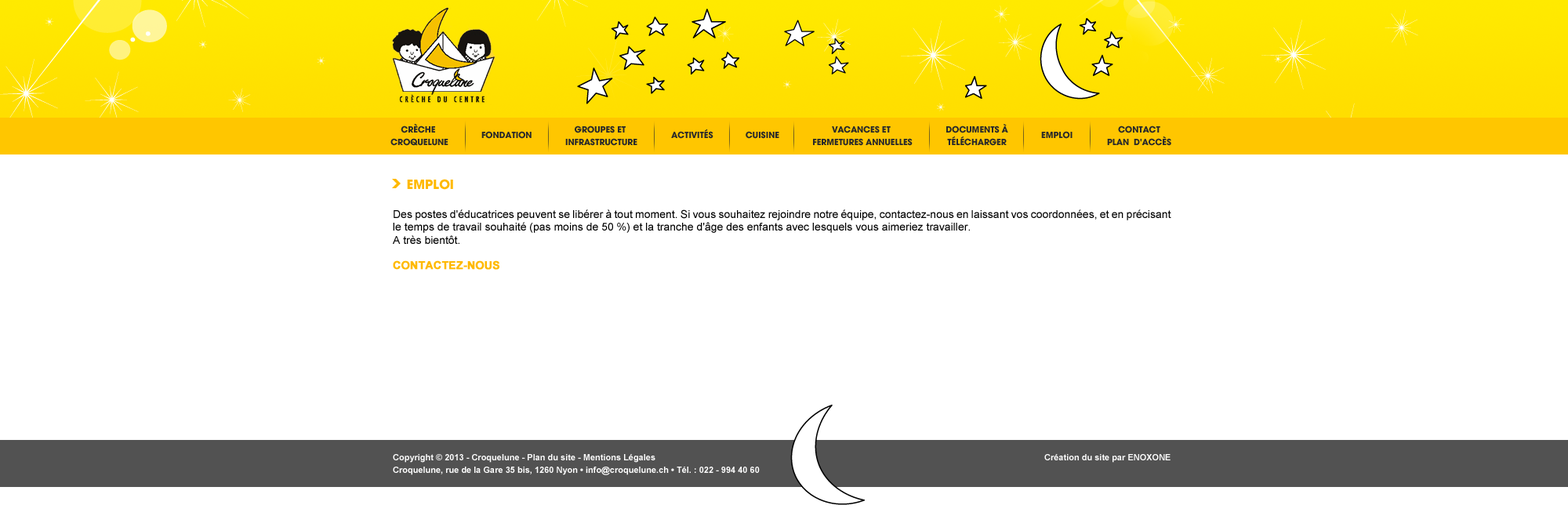
<style>
.page{position:relative;width:1568px;height:527px;background:#ffffff}
.page>*{position:absolute;margin:0}
.t1{font:9.4px/12.7px "AvantGard-Bold";color:#2a2a2a;text-transform:uppercase}
.t2{font:9.4px "AvantGard-Bold";color:#2a2a2a;text-transform:uppercase}
.t3{font:14.1px "AvantGard-Bold";color:#ffb900;text-transform:uppercase}
.t4{font:11px/12.7px "ArialMT";color:#000000}
.t5{font:11px/12.7px "Arial-BoldMT";color:#ffb900;text-transform:uppercase;font-weight:bold}
.t6{font:8.6px/12.7px "Arial-BoldMT";color:#ffffff}
</style>
<div class="page">
<p class="t1" style="left:390px;top:123px;width:58px;height:23px;text-align:center">Crèche <br>Croquelune</p>
<p class="t1" style="left:565px;top:125px;width:72px;height:21px;text-align:center">Groupes et <br>infrastructure</p>
<p class="t1" style="left:813px;top:125px;width:100px;height:21px;text-align:center">Vacances et <br>fermetures annuelles</p>
<p class="t1" style="left:946px;top:124px;width:62px;height:22px;text-align:center">DOCUMENTs à<br>télécharger</p>
<p class="t1" style="left:1107px;top:125px;width:64px;height:21px;text-align:center">Contact<br>Plan  d'accès</p>
<p class="t2" style="left:481px;top:131px;width:51px;height:8px">Fondation</p>
<p class="t2" style="left:671px;top:129px;width:42px;height:10px">ACTIVITés</p>
<p class="t2" style="left:746px;top:131px;width:33px;height:8px">Cuisine</p>
<p class="t2" style="left:1041px;top:131px;width:32px;height:8px">Emploi</p>
<p class="t3" style="left:407px;top:179px;width:46px;height:11px">EMPLOI</p>
<p class="t4" style="left:393px;top:209px;width:778px;height:61px;text-align:justify">Des postes d'éducatrices peuvent se libérer à tout moment. Si vous souhaitez rejoindre notre équipe, contactez-nous en laissant vos coordonnées, et en précisant le temps de travail souhaité (pas moins de 50 %) et la tranche d'âge des enfants avec lesquels vous aimeriez travailler.<br>A très bientôt.<br><br><span class="t5">CONTACTEZ-NOUS</span></p>
<p class="t6" style="left:393px;top:454px;width:778px;height:21px">Copyright © 2013 - Croquelune - Plan du site - Mentions Légales                                                             Création du site par ENOXONE<br>Croquelune, rue de la Gare 35 bis, 1260 Nyon • info@croquelune.ch • Tél. : 022 - 994 40 60</p>
</div>
